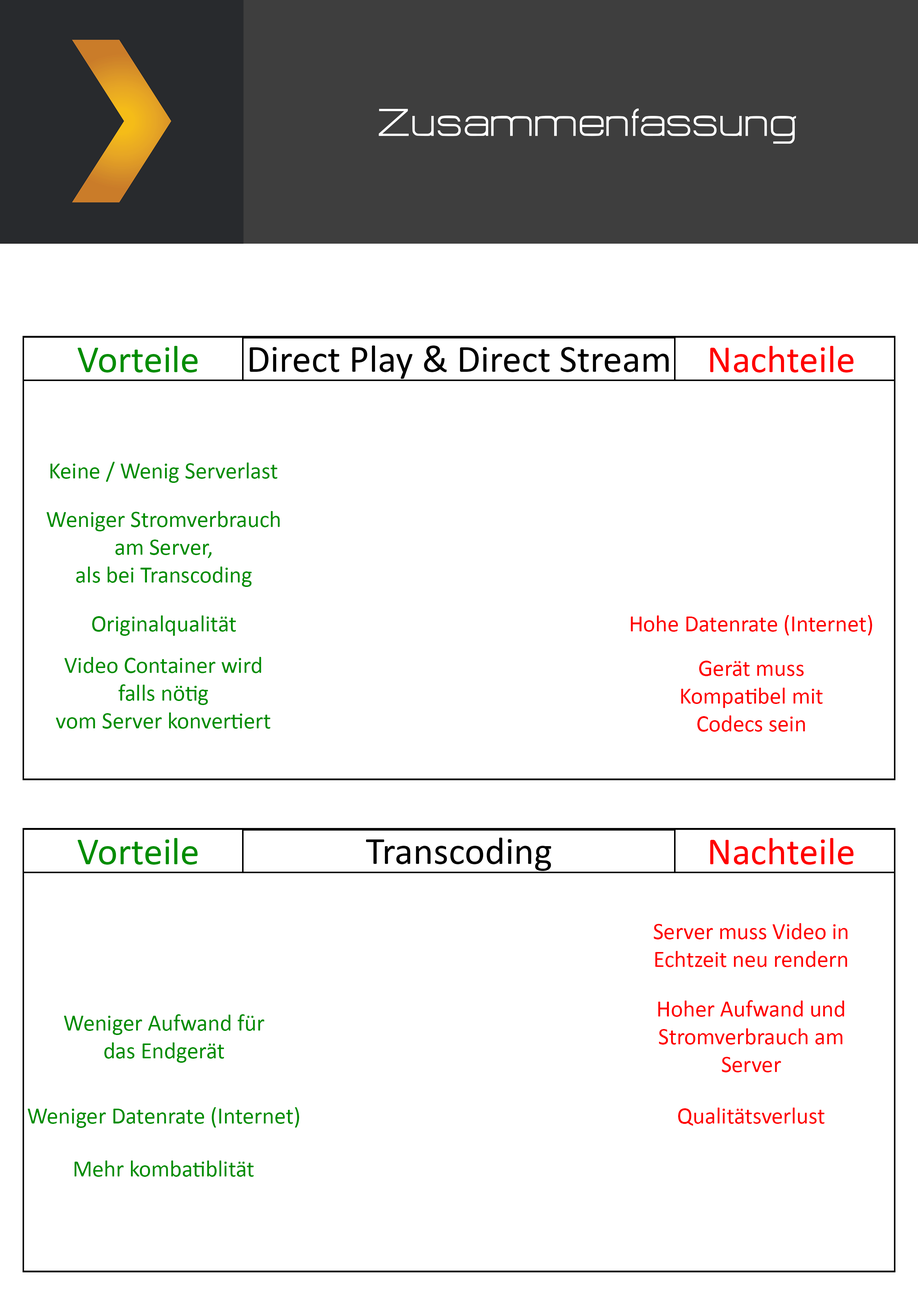
<style>
.page{position:relative;width:918px;height:1299px;background:#ffffff}
.page>*{position:absolute;margin:0}
.t1{font:47.8px "HURTMOLDPersonalUse-Regular";color:#ffffff}
.t2{font:38.6px "Calibri";color:#008d00}
.t3{font:38.6px "Calibri";color:#000000}
.t4{font:38.6px "Calibri";color:#ff0000}
.t5{font:23.1px "Calibri";color:#008d00}
.t6{font:23.1px "Calibri";color:#ff0000}
</style>
<div class="page">
<p class="t1" style="left:379px;top:108px;width:417px;height:36px">Zusammenfassung</p>
<p class="t2" style="left:77px;top:346px;width:121px;height:26px">Vorteile</p>
<p class="t3" style="left:250px;top:345px;width:419px;height:34px">Direct Play &amp; Direct Stream</p>
<p class="t4" style="left:710px;top:346px;width:144px;height:26px">Nachteile</p>
<p class="t5" style="left:50px;top:462px;width:228px;height:21px">Keine / Wenig Serverlast</p>
<p class="t5" style="left:46px;top:511px;width:234px;height:76px;text-align:center">Weniger Stromverbrauch<br>am Server,<br>als bei Transcoding</p>
<p class="t5" style="left:92px;top:615px;width:144px;height:21px">Originalqualität</p>
<p class="t6" style="left:631px;top:615px;width:241px;height:20px">Hohe Datenrate (Internet)</p>
<p class="t5" style="left:56px;top:657px;width:215px;height:72px;text-align:center">Video Container wird<br>falls nötig<br>vom Server konvertiert</p>
<p class="t6" style="left:681px;top:660px;width:142px;height:72px;text-align:center">Gerät muss<br>Kompatibel mit<br>Codecs sein</p>
<p class="t2" style="left:77px;top:838px;width:121px;height:26px">Vorteile</p>
<p class="t3" style="left:366px;top:837px;width:185px;height:34px">Transcoding</p>
<p class="t4" style="left:710px;top:838px;width:144px;height:26px">Nachteile</p>
<p class="t6" style="left:654px;top:923px;width:194px;height:44px;text-align:center">Server muss Video in<br>Echtzeit neu rendern</p>
<p class="t6" style="left:658px;top:1000px;width:186px;height:72px;text-align:center">Hoher Aufwand und<br>Stromverbrauch am<br>Server</p>
<p class="t5" style="left:64px;top:1014px;width:200px;height:49px;text-align:center">Weniger Aufwand für<br>das Endgerät</p>
<p class="t5" style="left:27px;top:1107px;width:272px;height:21px">Weniger Datenrate (Internet)</p>
<p class="t6" style="left:678px;top:1107px;width:147px;height:18px">Qualitätsverlust</p>
<p class="t5" style="left:74px;top:1160px;width:180px;height:17px">Mehr kombatiblität</p>
</div>
